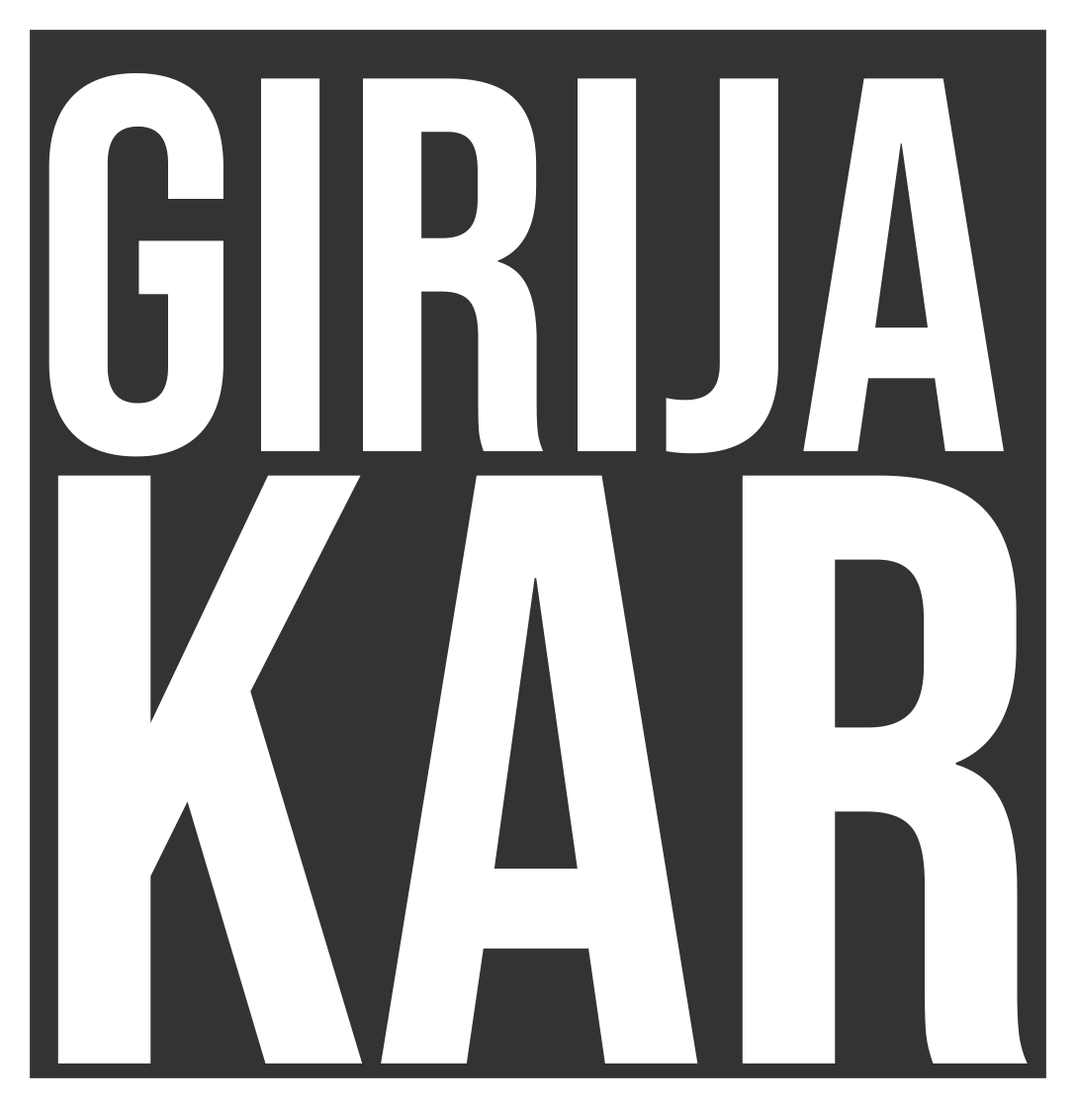
<style>
.page{position:relative;width:1076px;height:1108px;background:#ffffff}
.page>*{position:absolute;margin:0}
.t1{font:532.3px "BebasNeue-Regular";color:#ffffff}
.t2{font:839.4px "BebasNeue-Regular";color:#ffffff}
</style>
<div class="page">
<p class="t1" style="left:48px;top:73px;width:956px;height:384px">GIRIJA</p>
<p class="t2" style="left:57px;top:475px;width:971px;height:588px">KAR</p>
</div>
